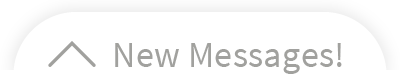
<style>
.page{position:relative;width:400px;height:80px;background:#ffffff}
.page>*{position:absolute;margin:0}
.t1{font:36px "SourceSansPro-Regular";letter-spacing:0.01em;color:#a1a19e}
</style>
<div class="page">
<p class="t1" style="left:115px;top:43px;width:227px;height:31px">New Messages!</p>
</div>
